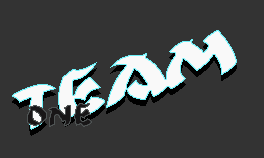
<style>
.page{position:relative;width:264px;height:158px;background:#333333}
.page>*{position:absolute;margin:0}
.t1{font:82.7px "Ninjastrike";color:#f9f9f9;scale:1.3 1}
.t2{font:40px "Ninjastrike"}
</style>
<div class="page">
<p class="t1" style="left:12px;top:30px;width:225px;height:100px;rotate:-17deg">Team</p>
<p class="t2" style="left:27px;top:103px;width:65px;height:24px">One</p>
</div>
